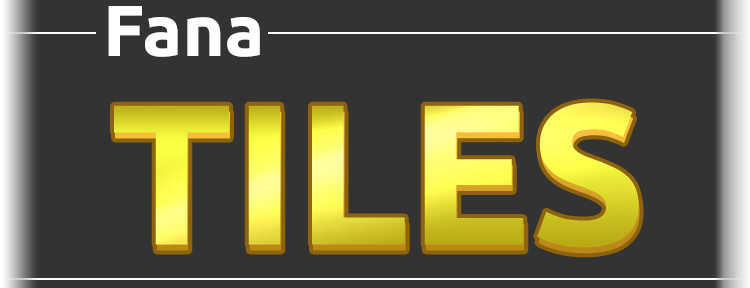
<style>
.page{position:relative;width:750px;height:288px;background:#333333}
.page>*{position:absolute;margin:0}
.t1{font:72px "Ubuntu-Bold";color:#ffffff}
.t2{font:200px "Ubuntu-Bold"}
</style>
<div class="page">
<p class="t1" style="left:108px;top:6px;width:152px;height:51px">Fana</p>
<p class="t2" style="left:114px;top:102px;width:525px;height:146px">TILES</p>
<p class="t2" style="left:115px;top:108px;width:525px;height:146px">TILES</p>
</div>
